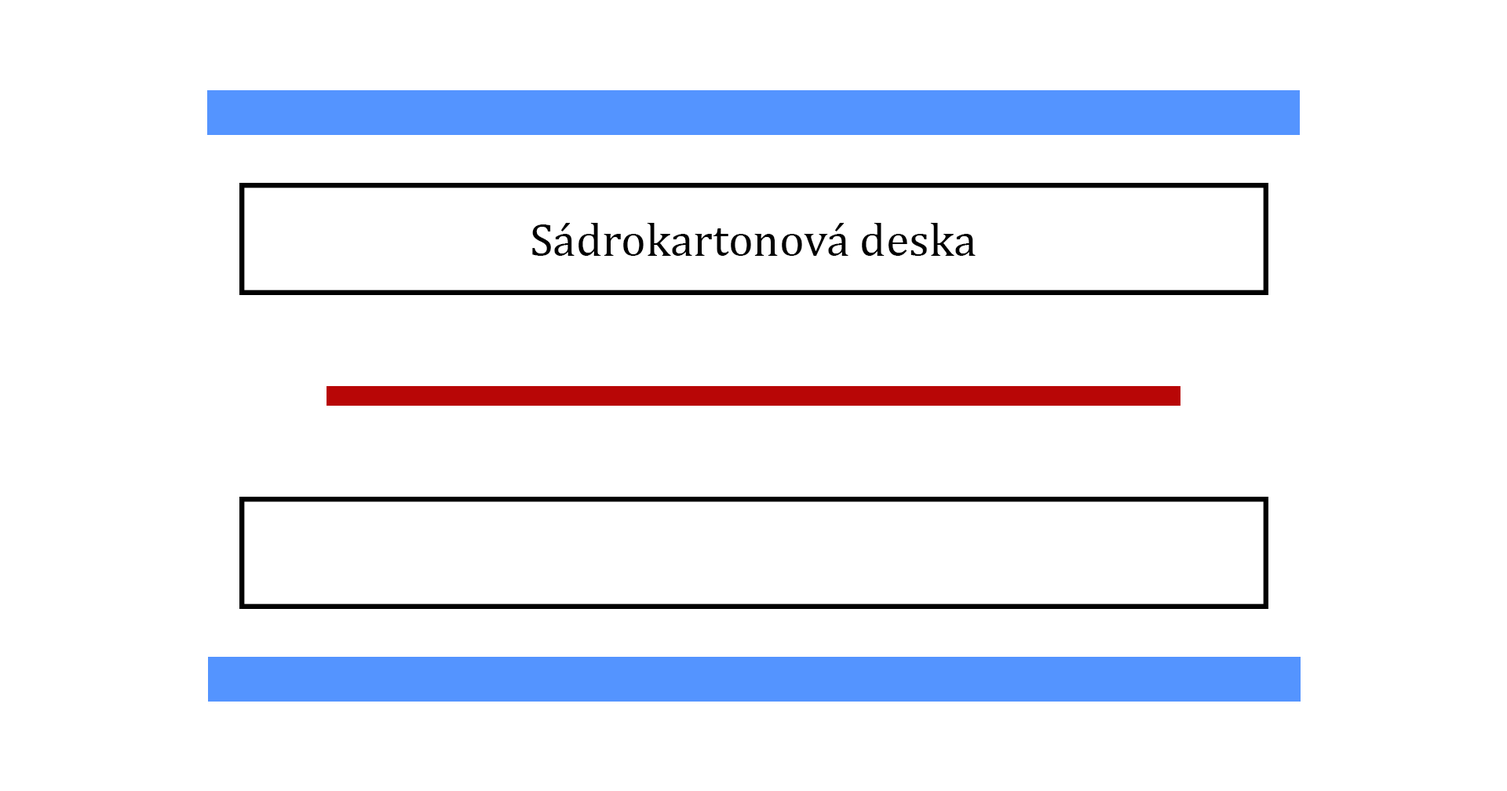
<style>
.page{position:relative;width:1507px;height:791px;background:#ffffff}
.page>*{position:absolute;margin:0}
.t1{font:47.1px "CambriaMath";color:#000000}
</style>
<div class="page">
<p class="t1" style="left:532px;top:223px;width:444px;height:33px">Sádrokartonová deska</p>
</div>
